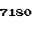
<style>
.page{position:relative;width:32px;height:32px;background:#ffffff}
.page>*{position:absolute;margin:0}
.t1{font:8px "PressStartK";color:#000000}
</style>
<div class="page">
<p class="t1" style="left:0px;top:8px;width:32px;height:9px">7180</p>
</div>
